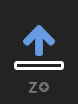
<style>
.page{position:relative;width:78px;height:104px;background:#232323}
.page>*{position:absolute;margin:0}
.t1{font:14px "SegoeUI";color:#7c7c7c;font-weight:bold}
</style>
<div class="page">
<p class="t1" style="left:28px;top:82px;width:9px;height:11px">Z</p>
</div>
